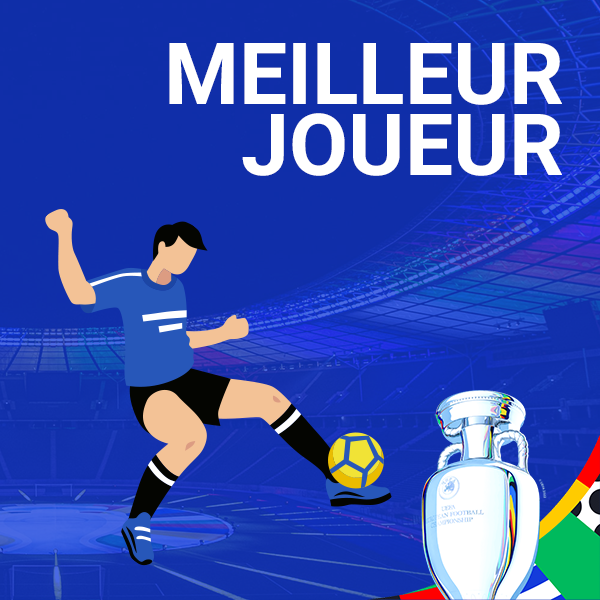
<style>
.page{position:relative;width:600px;height:600px}
.page>*{position:absolute;margin:0}
.t1{font:85.7px/71.4px "Roboto-Bold";color:#ffffff;text-transform:uppercase}
</style>
<div class="page">
<p class="t1" style="left:169px;top:43px;width:393px;height:133px;text-align:right">Meilleur<br>joueur</p>
</div>
